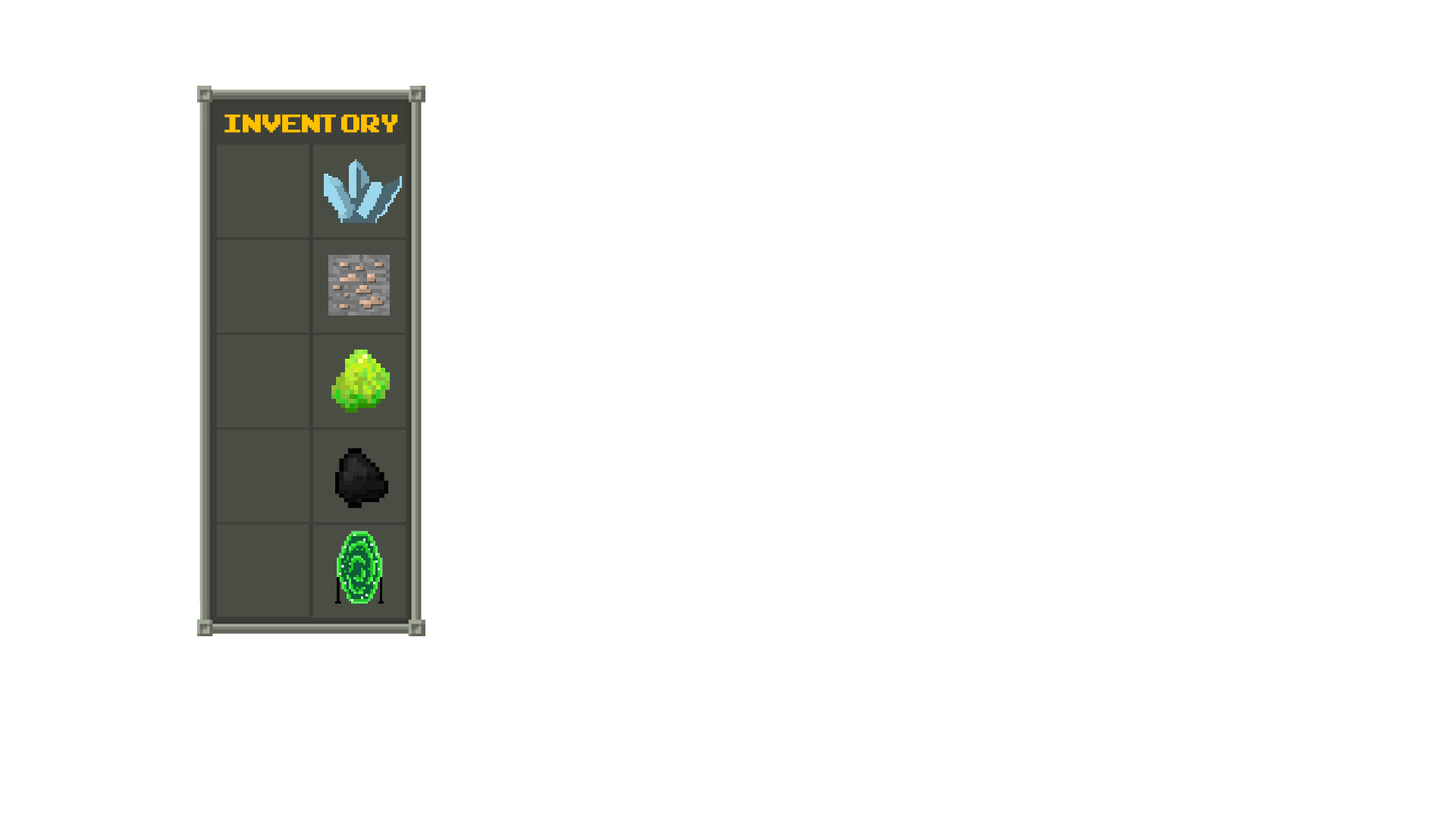
<style>
.page{position:relative;width:1456px;height:819px;background:#ffffff}
.page>*{position:absolute;margin:0}
.t1{font:34.1px "ArcadeClassic";color:#ffc000;font-weight:bold}
</style>
<div class="page">
<p class="t1" style="left:224px;top:115px;width:174px;height:18px">inventory</p>
</div>
